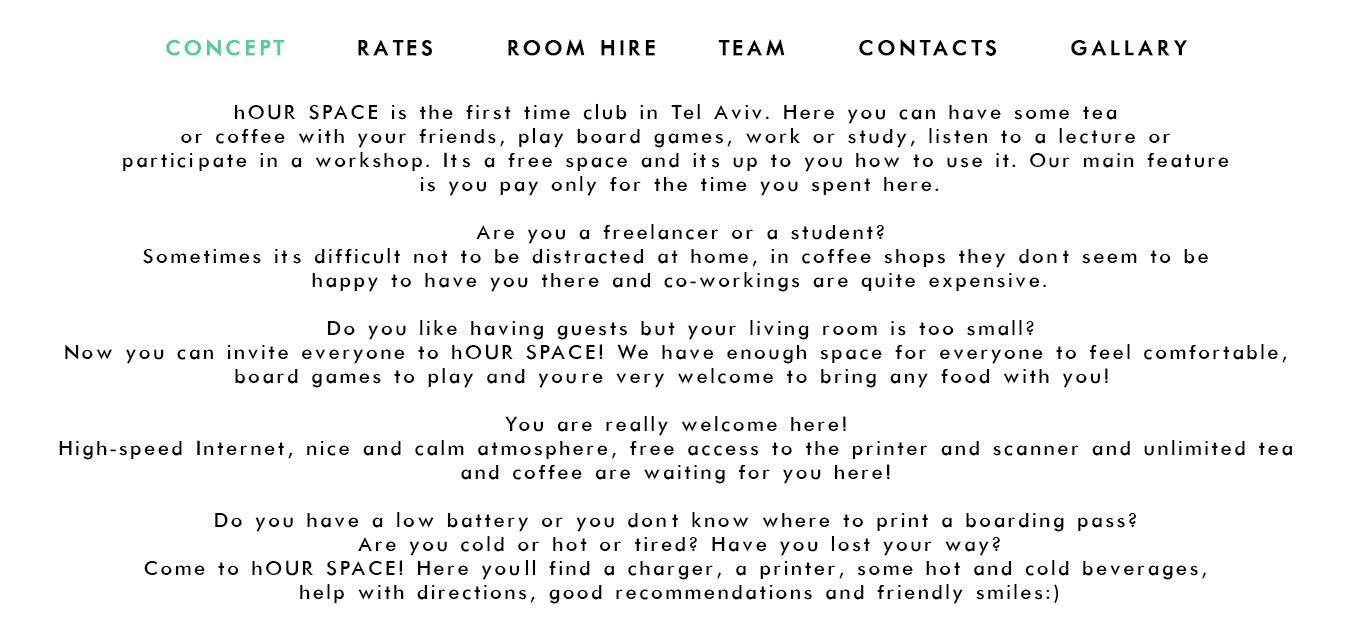
<style>
.page{position:relative;width:1351px;height:638px;background:#ffffff}
.page>*{position:absolute;margin:0}
.t1{font:24px "Futura-Normal";letter-spacing:0.12em;color:#000000;text-transform:uppercase;font-weight:bold}
.t2{font:24px "Futura-Normal";letter-spacing:0.12em;color:#56cc9d;text-transform:uppercase;font-weight:bold}
.t3{font:23px/24px "Futura-Normal";letter-spacing:0.1em;color:#000000}
</style>
<div class="page">
<p class="t1" style="left:166px;top:39px;width:1021px;height:17px"><span class="t2">concept</span>      rates      room hire     team      contacts      gallary</p>
<p class="t3" style="left:59px;top:103px;width:1233px;height:501px;text-align:center">hOUR SPACE is the first time club in Tel Aviv. Here you can have some tea <br>or coffee with your friends, play board games, work or study, listen to a lecture or <br>participate in a workshop. It’s a free space and it’s up to you how to use it. Our main feature <br>is you pay only for the time you spent here.<br><br> Are you a freelancer or a student? <br>Sometimes it’s difficult not to be distracted at home, in coffee shops they don’t seem to be <br>happy to have you there and co-workings are quite expensive.<br><br> Do you like having guests but your living room is too small? <br>Now you can invite everyone to hOUR SPACE! We have enough space for everyone to feel comfortable, <br>board games to play and you’re very welcome to bring any food with you!  <br><br>You are really welcome here! <br>High-speed Internet, nice and calm atmosphere, free access to the printer and scanner and unlimited tea <br>and coffee are waiting for you here! <br><br>Do you have a low battery or you don’t know where to print a boarding pass? <br>Are you cold or hot or tired? Have you lost your way?<br>Come to hOUR SPACE! Here you’ll find a charger, a printer, some hot and cold beverages, <br>help with directions, good recommendations and friendly smiles:)</p>
</div>
